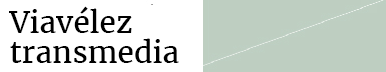
<style>
.page{position:relative;width:386px;height:72px;background:#ffffff}
.page>*{position:absolute;margin:0}
.t1{font:30px/30px "Merriweather-Regular";color:#000000}
</style>
<div class="page">
<p class="t1" style="left:9px;top:6px;width:170px;height:57px">Viavélez <br>transmedia</p>
</div>
